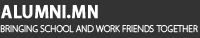
<style>
.page{position:relative;width:200px;height:38px;background:#333333}
.page>*{position:absolute;margin:0}
.t1{font:16.9px "KozGoPr6N-Bold";letter-spacing:-0.01em;color:#ffffff;text-transform:uppercase;font-weight:bold}
.t2{font:8.4px "KozGoPr6N-ExtraLight";letter-spacing:-0.01em;color:#ffffff;text-transform:uppercase;font-weight:bold}
</style>
<div class="page">
<p class="t1" style="left:1px;top:5px;width:97px;height:14px">alumni.MN</p>
<p class="t2" style="left:0px;top:25px;width:198px;height:8px">bringing school and work friends together</p>
</div>
